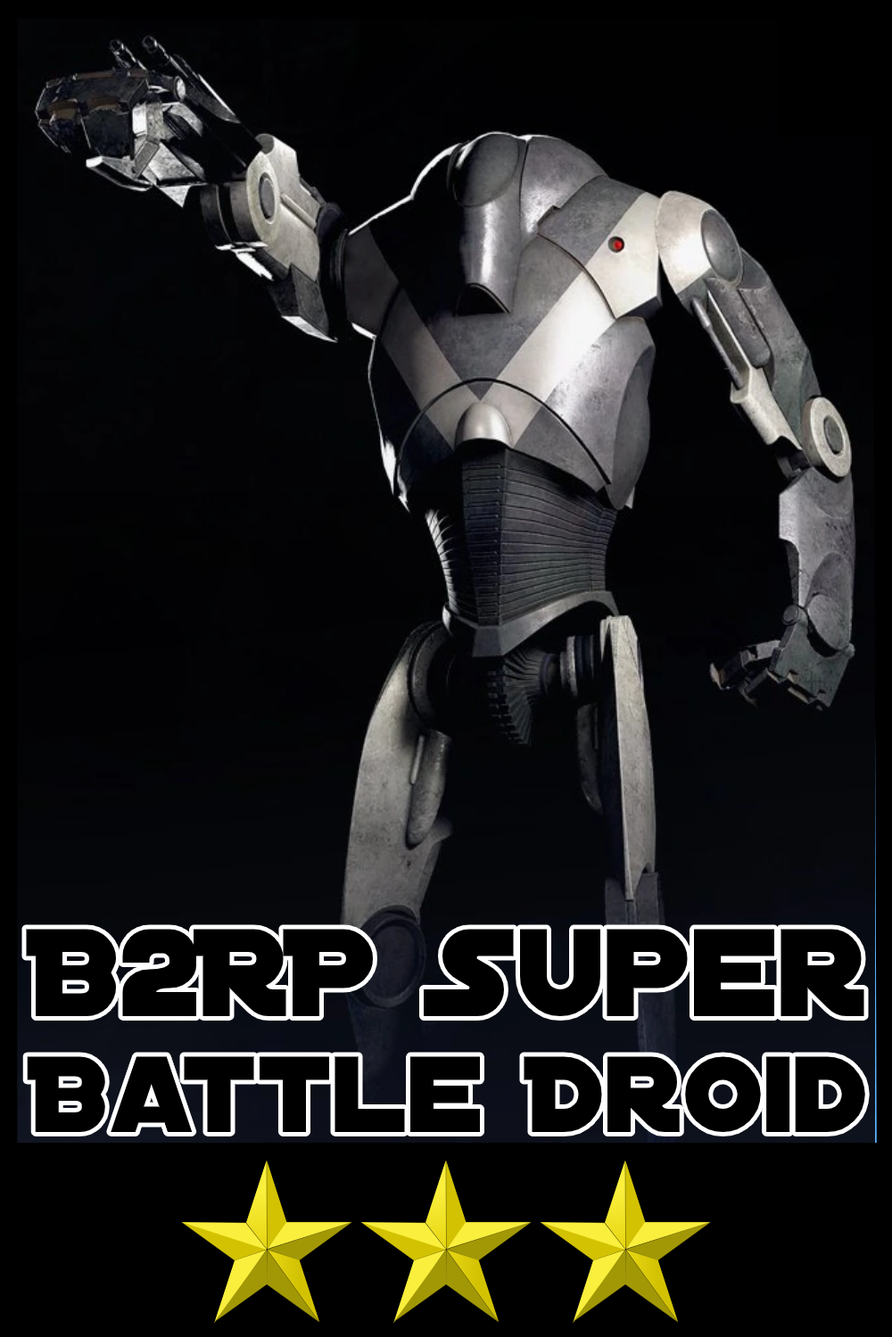
<style>
.page{position:relative;width:892px;height:1337px;background:#000000}
.page>*{position:absolute;margin:0}
.t1{font:115.9px/115.9px "DistantGalaxy";color:#000000}
.t2{font:133.7px/111.5px "DistantGalaxy";color:#000000}
</style>
<div class="page">
<p class="t1" style="left:26px;top:929px;width:839px;height:203px;text-align:center"><span class="t2">B2RP Super<br></span>Battle Droid</p>
</div>
